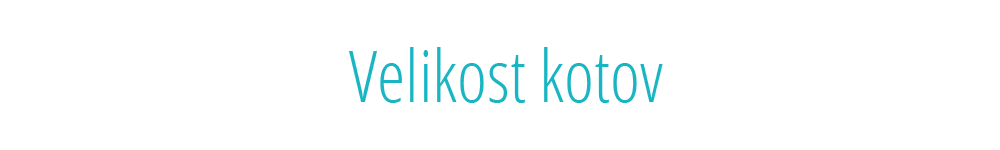
<style>
.page{position:relative;width:1000px;height:150px;background:#ffffff}
.page>*{position:absolute;margin:0}
.t1{font:72px "OpenSans-CondensedLight";color:#1ab5c3}
</style>
<div class="page">
<p class="t1" style="left:349px;top:47px;width:314px;height:56px">Velikost kotov</p>
</div>
